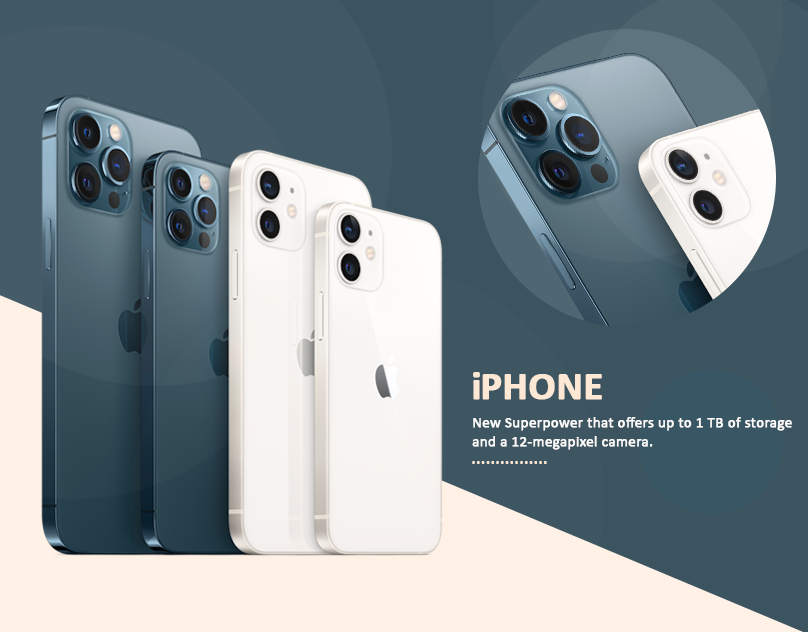
<style>
.page{position:relative;width:808px;height:632px}
.page>*{position:absolute;margin:0}
.t1{font:40px "Calibri-Bold";letter-spacing:-0.05em;color:#fde8d5;text-transform:uppercase;font-weight:bold}
.t2{font:40px "Calibri-Bold";letter-spacing:-0.05em;color:#fde8d5;font-weight:bold}
.t3{font:15px/19px "Calibri";color:#fefcfb;font-weight:bold}
.t4{font:23.6px "Calibri";letter-spacing:-0.05em;color:#fde8d5}
</style>
<div class="page">
<p class="t1" style="left:473px;top:372px;width:129px;height:28px"><span class="t2">i</span>phone</p>
<p class="t3" style="left:472px;top:417px;width:320px;height:33px">New Superpower that offers up to 1 TB of storage <br>and a 12-megapixel camera.</p>
<p class="t4" style="left:472px;top:461px;width:75px;height:3px">................</p>
</div>
